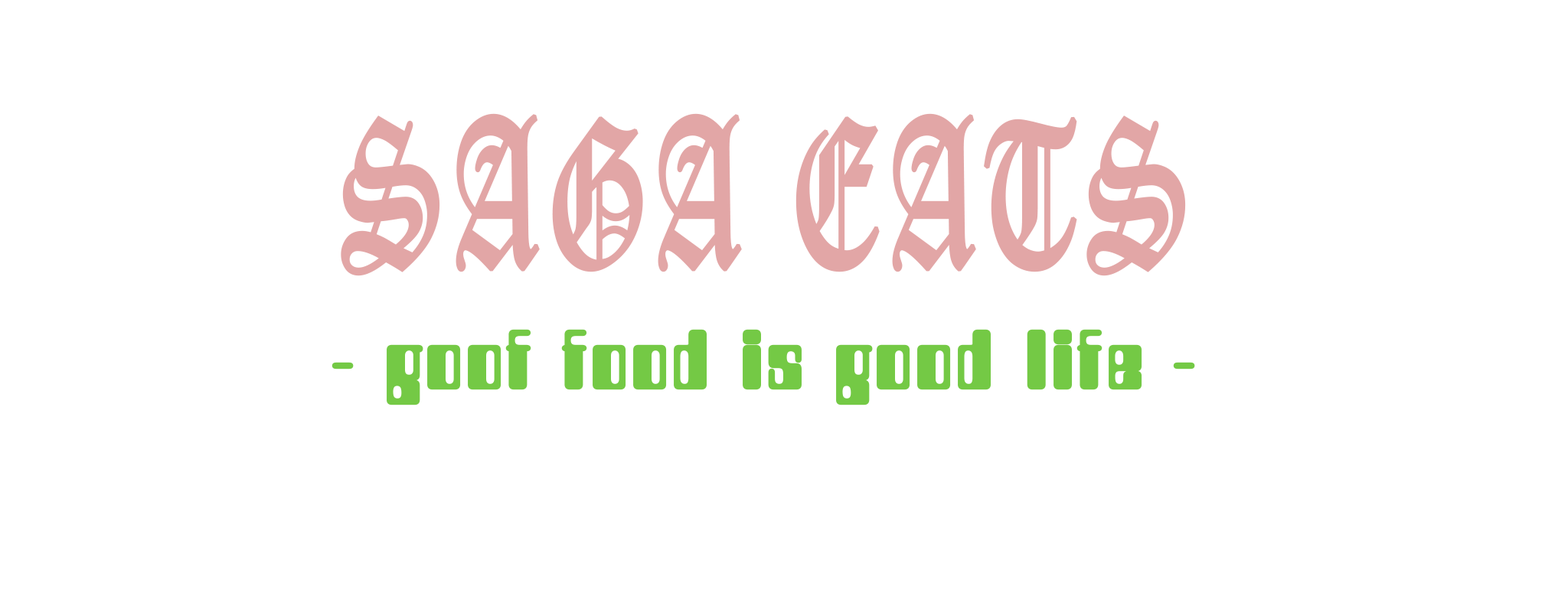
<style>
.page{position:relative;width:1568px;height:612px;background:#ffffff}
.page>*{position:absolute;margin:0}
.t1{font:207.9px "OldEnglishTextMT";letter-spacing:0.049em;color:#e2a6a6;font-weight:bold;scale:0.58 1}
.t2{font:84.7px "CountdownD";letter-spacing:0.049em;color:#74c945;font-weight:bold}
</style>
<div class="page">
<p class="t1" style="left:341px;top:113px;width:845px;height:163px">SAGA EATS</p>
<p class="t2" style="left:332px;top:329px;width:863px;height:77px">- goof food is good life -</p>
</div>
